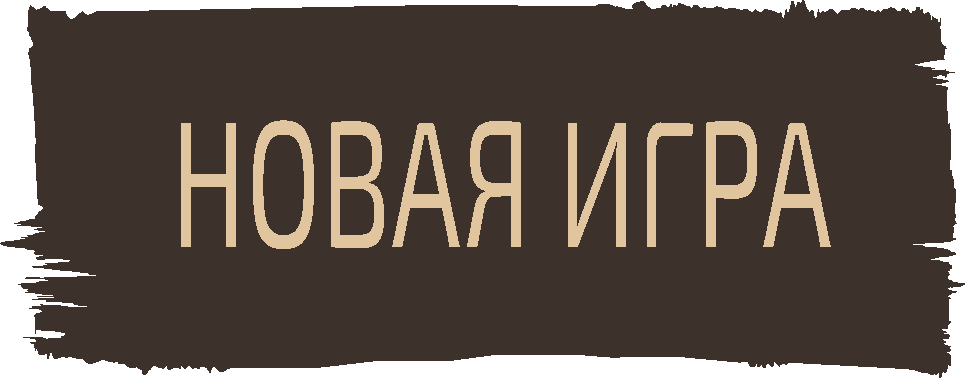
<style>
.page{position:relative;width:965px;height:378px;background:#3d312b}
.page>*{position:absolute;margin:0}
.t1{font:180.2px "Exo2-Regular";color:#e2c59f;text-transform:uppercase;scale:0.62 1}
</style>
<div class="page">
<p class="t1" style="left:181px;top:120px;width:650px;height:129px">Новая игра</p>
</div>
